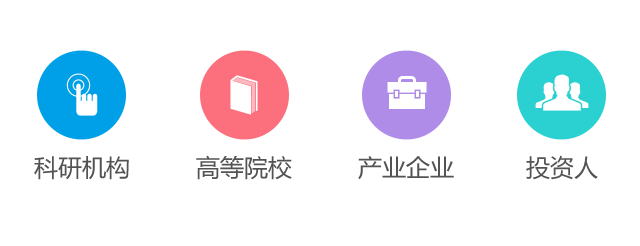
<style>
.page{position:relative;width:640px;height:246px;background:#ffffff}
.page>*{position:absolute;margin:0}
.t1{font:24px "MicrosoftYaHei";color:#535353}
</style>
<div class="page">
<p class="t1" style="left:34px;top:156px;width:95px;height:24px">科研机构</p>
<p class="t1" style="left:196px;top:155px;width:96px;height:25px">高等院校</p>
<p class="t1" style="left:358px;top:156px;width:96px;height:24px">产业企业</p>
<p class="t1" style="left:526px;top:155px;width:72px;height:25px">投资人</p>
</div>
